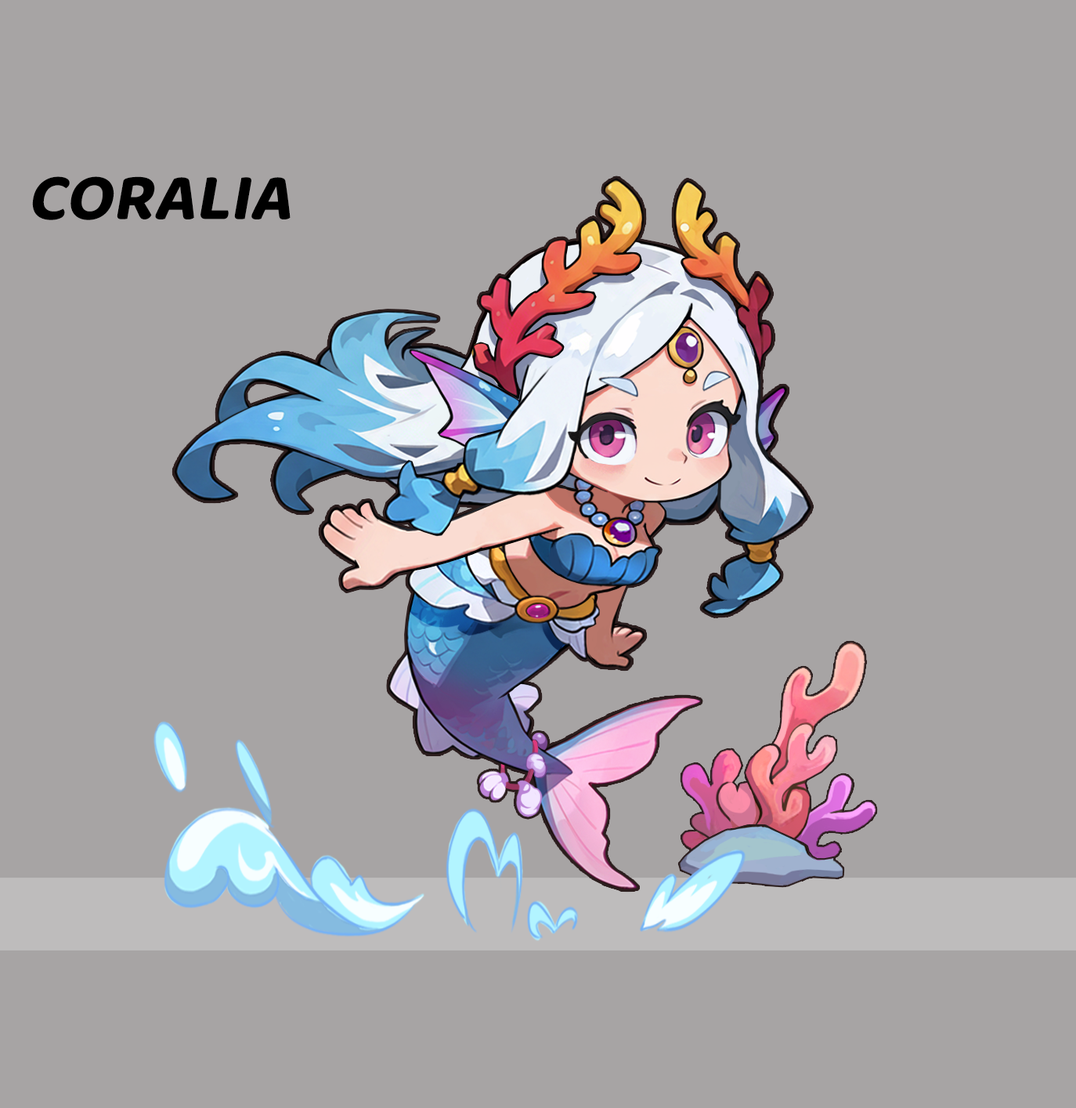
<style>
.page{position:relative;width:1076px;height:1108px;background:#a7a4a4}
.page>*{position:absolute;margin:0}
.t1{font:67.3px "BalooTammudu2-Bold";color:#000000;text-transform:uppercase;font-style:italic}
</style>
<div class="page">
<p class="t1" style="left:32px;top:176px;width:259px;height:44px">CORALIA</p>
</div>
